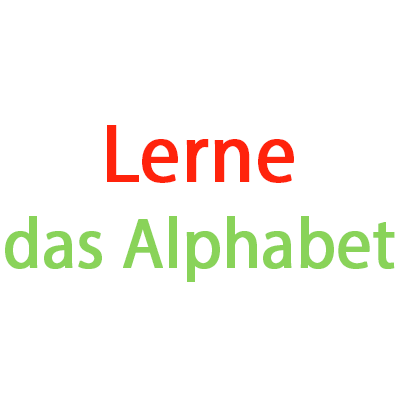
<style>
.page{position:relative;width:400px;height:400px;background:#ffffff}
.page>*{position:absolute;margin:0}
.t1{font:71.6px "MyriadPro-Regular";color:#89d359;font-weight:bold;scale:0.94 1}
.t2{font:83.8px "MyriadPro-Regular";color:#ff230c;font-weight:bold;scale:0.94 1}
</style>
<div class="page">
<p class="t1" style="left:5px;top:125px;width:390px;height:157px;text-align:center"><span class="t2">Lerne<br></span>das Alphabet</p>
</div>
